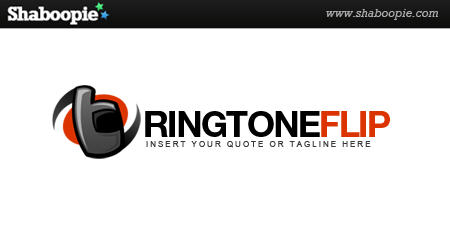
<style>
.page{position:relative;width:450px;height:250px;background:#ffffff}
.page>*{position:absolute;margin:0}
.t1{font:36px "HelveticaNeueLTStd-Bd";letter-spacing:-0.05em;color:#000000;text-transform:uppercase}
.t2{font:36px "HelveticaNeueLTStd-Bd";letter-spacing:-0.05em;color:#db3400;text-transform:uppercase}
.t3{font:8px "ArialMT";letter-spacing:0.25em;color:#383838;text-transform:uppercase}
</style>
<div class="page">
<p class="t1" style="left:145px;top:111px;width:245px;height:26px">ringtone<span class="t2">flip</span></p>
<p class="t3" style="left:146px;top:141px;width:225px;height:7px">INSERT YOUR QUOTE OR TAGLINE HERE</p>
</div>
